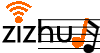
<style>
.page{position:relative;width:100px;height:53px;background:#ffffff}
.page>*{position:absolute;margin:0}
.t1{font:30px "CenturyGothic";color:#000000;font-weight:bold}
</style>
<div class="page">
<p class="t1" style="left:2px;top:19px;width:70px;height:24px">zizhu</p>
</div>
